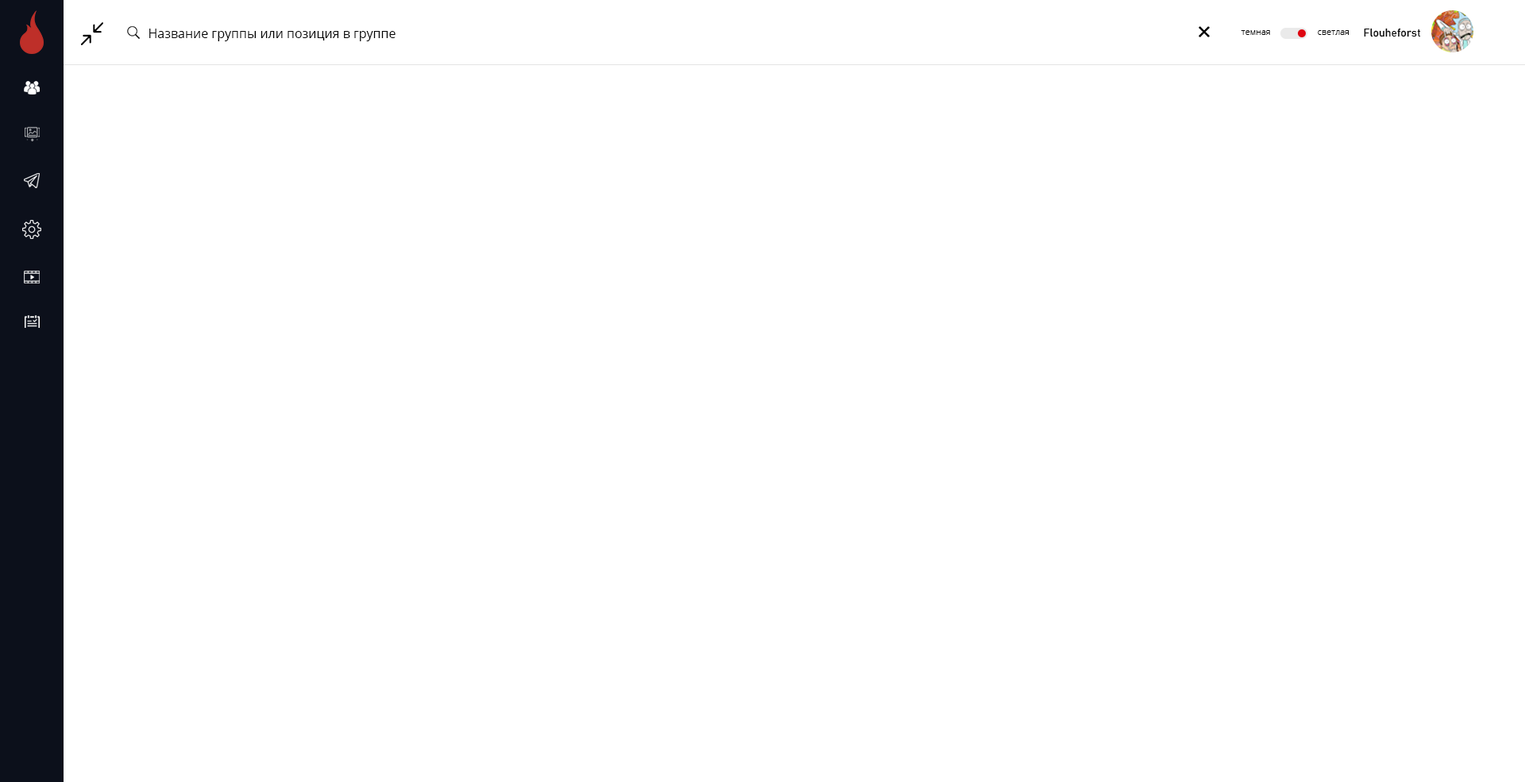
<style>
.page{position:relative;width:1525px;height:782px;background:#ffffff}
.page>*{position:absolute;margin:0}
.t1{font:12.7px "OpenSans";color:#000000}
.t2{font:11.1px "Bahnschrift";color:#000000}
.t3{font:8.7px "OpenSans-Light";color:#000000}
</style>
<div class="page">
<p class="t1" style="left:149px;top:29px;width:246px;height:12px">Название группы или позиция в группе</p>
<p class="t2" style="left:1363px;top:28px;width:58px;height:9px">Flouheforst</p>
<p class="t3" style="left:1240px;top:30px;width:30px;height:5px">темная</p>
<p class="t3" style="left:1317px;top:30px;width:31px;height:5px">светлая</p>
</div>
